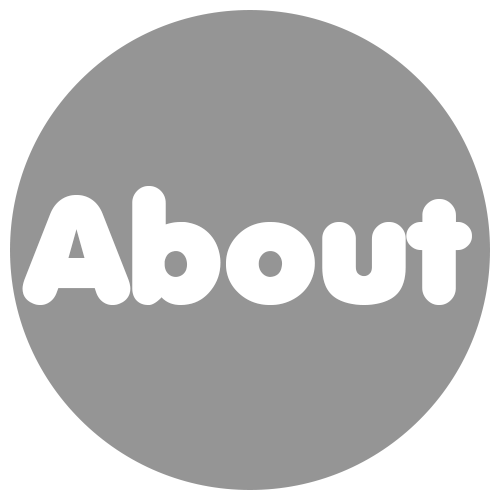
<style>
.page{position:relative;width:500px;height:500px;background:#959595}
.page>*{position:absolute;margin:0}
.t1{font:150px "Valken";color:#ffffff}
</style>
<div class="page">
<p class="t1" style="left:22px;top:186px;width:450px;height:119px">About</p>
</div>
